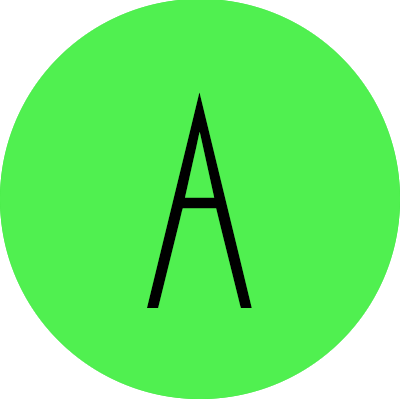
<style>
.page{position:relative;width:400px;height:400px;background:#50f050}
.page>*{position:absolute;margin:0}
.t1{font:300px "Vanadine-Bold";color:#000000}
</style>
<div class="page">
<p class="t1" style="left:147px;top:92px;width:105px;height:216px">A</p>
</div>
